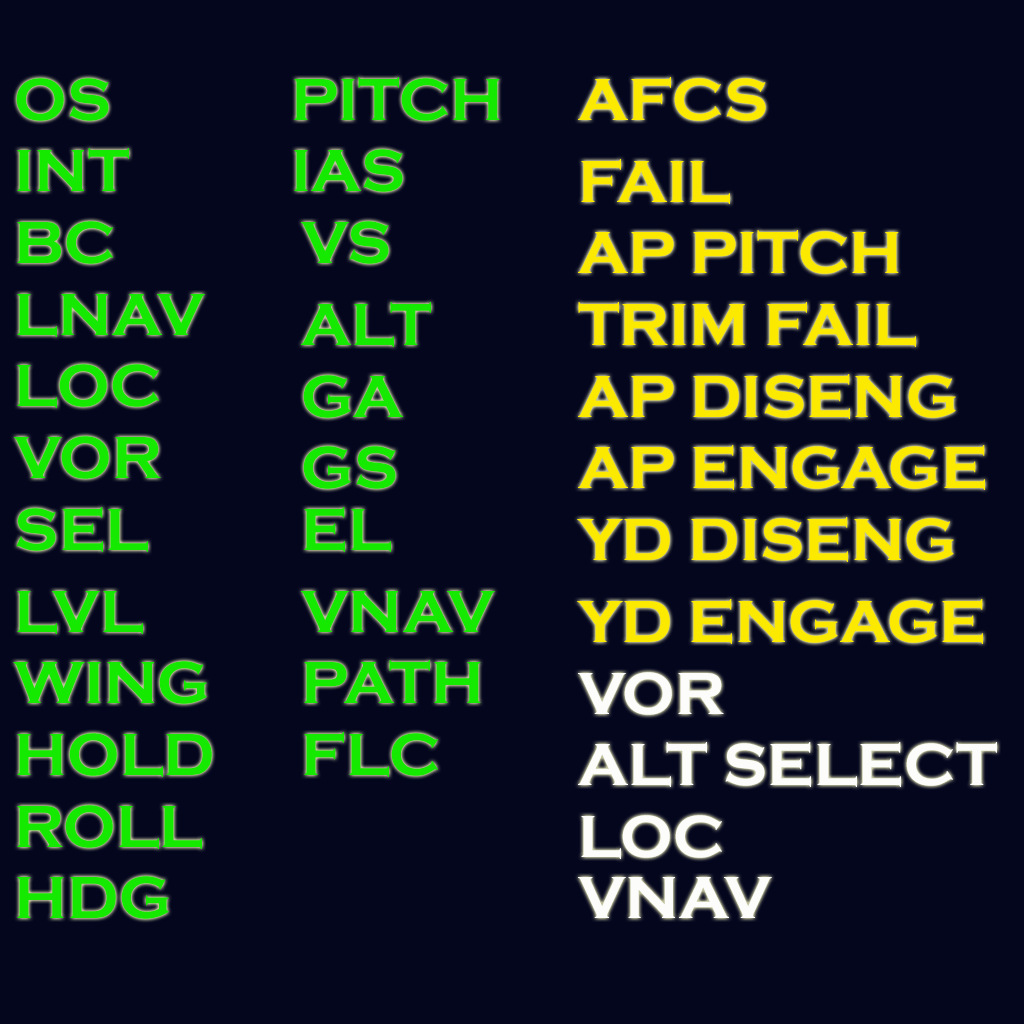
<style>
.page{position:relative;width:1024px;height:1024px;background:#04061e}
.page>*{position:absolute;margin:0}
.t1{font:61.4px "CopperplateGothic-Bold";color:#15e900}
.t2{font:61.4px "CopperplateGothic-Bold";color:#fce900}
.t3{font:61.4px "CopperplateGothic-Bold";color:#fcfdfb}
</style>
<div class="page">
<p class="t1" style="left:16px;top:78px;width:93px;height:43px">OS</p>
<p class="t1" style="left:294px;top:77px;width:206px;height:44px">PITCH</p>
<p class="t2" style="left:578px;top:77px;width:188px;height:44px">AFCS</p>
<p class="t1" style="left:17px;top:148px;width:112px;height:43px">INT</p>
<p class="t1" style="left:294px;top:149px;width:109px;height:43px">IAS</p>
<p class="t2" style="left:581px;top:159px;width:149px;height:45px">FAIL</p>
<p class="t1" style="left:17px;top:221px;width:96px;height:43px">BC</p>
<p class="t1" style="left:301px;top:221px;width:88px;height:43px">VS</p>
<p class="t2" style="left:578px;top:230px;width:321px;height:44px">AP PITCH</p>
<p class="t1" style="left:17px;top:294px;width:188px;height:43px">LNAV</p>
<p class="t1" style="left:301px;top:302px;width:130px;height:45px">ALT</p>
<p class="t2" style="left:578px;top:302px;width:338px;height:45px">TRIM FAIL</p>
<p class="t1" style="left:17px;top:364px;width:142px;height:44px">LOC</p>
<p class="t1" style="left:303px;top:375px;width:100px;height:43px">GA</p>
<p class="t2" style="left:578px;top:374px;width:378px;height:45px">AP DISENG</p>
<p class="t1" style="left:14px;top:436px;width:147px;height:43px">VOR</p>
<p class="t1" style="left:303px;top:446px;width:93px;height:43px">GS</p>
<p class="t2" style="left:578px;top:445px;width:407px;height:45px">AP ENGAGE</p>
<p class="t1" style="left:16px;top:507px;width:132px;height:45px">SEL</p>
<p class="t1" style="left:304px;top:507px;width:87px;height:45px">EL</p>
<p class="t2" style="left:577px;top:517px;width:377px;height:45px">YD DISENG</p>
<p class="t1" style="left:17px;top:591px;width:126px;height:43px">LVL</p>
<p class="t1" style="left:301px;top:591px;width:194px;height:41px">VNAV</p>
<p class="t2" style="left:577px;top:599px;width:406px;height:45px">YD ENGAGE</p>
<p class="t1" style="left:13px;top:661px;width:194px;height:43px">WING</p>
<p class="t1" style="left:304px;top:660px;width:177px;height:43px">PATH</p>
<p class="t3" style="left:578px;top:672px;width:146px;height:43px">VOR</p>
<p class="t1" style="left:17px;top:733px;width:195px;height:44px">HOLD</p>
<p class="t1" style="left:304px;top:732px;width:134px;height:45px">FLC</p>
<p class="t3" style="left:578px;top:742px;width:419px;height:45px">ALT SELECT</p>
<p class="t1" style="left:17px;top:805px;width:185px;height:44px">ROLL</p>
<p class="t3" style="left:581px;top:815px;width:141px;height:44px">LOC</p>
<p class="t1" style="left:17px;top:876px;width:152px;height:43px">HDG</p>
<p class="t3" style="left:578px;top:877px;width:194px;height:41px">VNAV</p>
</div>
